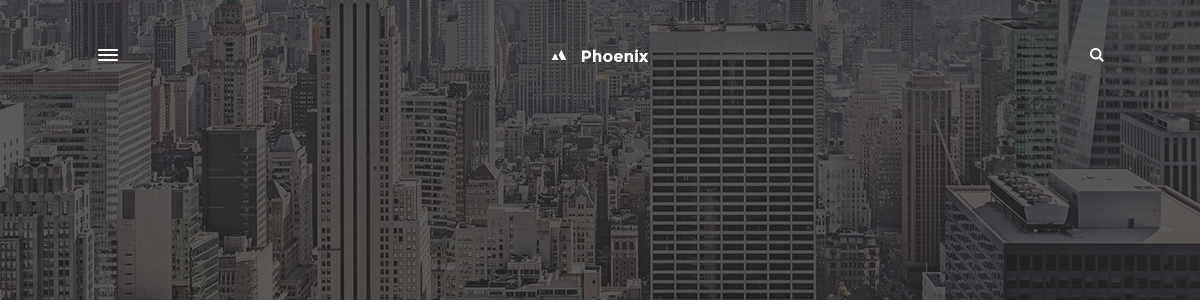
<style>
.page{position:relative;width:1200px;height:300px}
.page>*{position:absolute;margin:0}
.t1{font:16.4px "Montserrat-Bold";color:#ffffff}
</style>
<div class="page">
<p class="t1" style="left:582px;top:49px;width:66px;height:13px">Phoenix</p>
</div>
